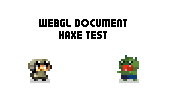
<style>
.page{position:relative;width:170px;height:100px;background:#ffffff}
.page>*{position:absolute;margin:0}
.t1{font:12px "BMaztecA12";color:#000000}
</style>
<div class="page">
<p class="t1" style="left:39px;top:19px;width:88px;height:8px">WEBGL DOCUMENT</p>
<p class="t1" style="left:59px;top:31px;width:48px;height:8px">HAXE TEST</p>
</div>
